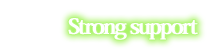
<style>
.page{position:relative;width:207px;height:49px;background:#ffffff}
.page>*{position:absolute;margin:0}
.t1{font:22px "HeiseiMinStd-W7";letter-spacing:-0.08em;color:#ffffff;font-weight:bold}
</style>
<div class="page">
<p class="t1" style="left:68px;top:18px;width:130px;height:22px">Strong support</p>
</div>
